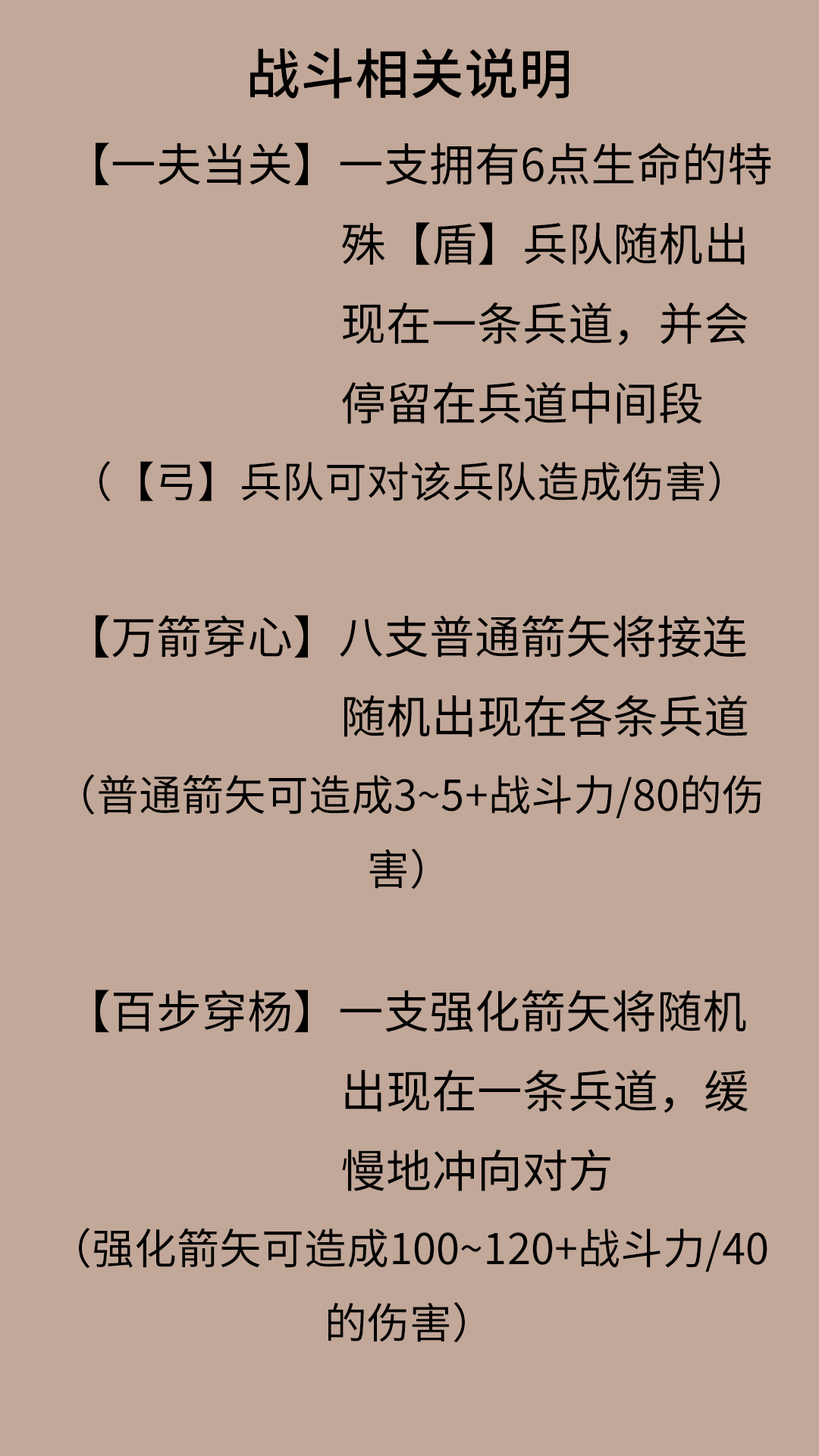
<style>
.page{position:relative;width:819px;height:1456px;background:#c2a899}
.page>*{position:absolute;margin:0}
.t1{font:45.5px "NotoSansHans-Regular";color:#000000}
.t2{font:54.6px "NotoSansHans-Medium";color:#000000}
.t3{font:42.5px "NotoSansHans-Regular";color:#000000}
</style>
<div class="page">
<p class="t1" style="left:79px;top:48px;width:692px;height:1295px;text-align:center"><span class="t2">战斗相关说明</span><br>  【一夫当关】一支拥有6点生命的特<br>                             殊【盾】兵队随机出<br>                             现在一条兵道，并会<br>                             停留在兵道中间段<br><span class="t3">（【弓】兵队可对该兵队造成伤害）<br></span>      <br>  【万箭穿心】八支普通箭矢将接连<br>                             随机出现在各条兵道<br><span class="t3">（普通箭矢可造成3~5+战斗力/80的伤害）<br><br></span>  【百步穿杨】一支强化箭矢将随机<br>                             出现在一条兵道，缓<br>                             慢地冲向对方<br><span class="t3">（强化箭矢可造成100~120+战斗力/40的伤害）</span></p>
</div>
